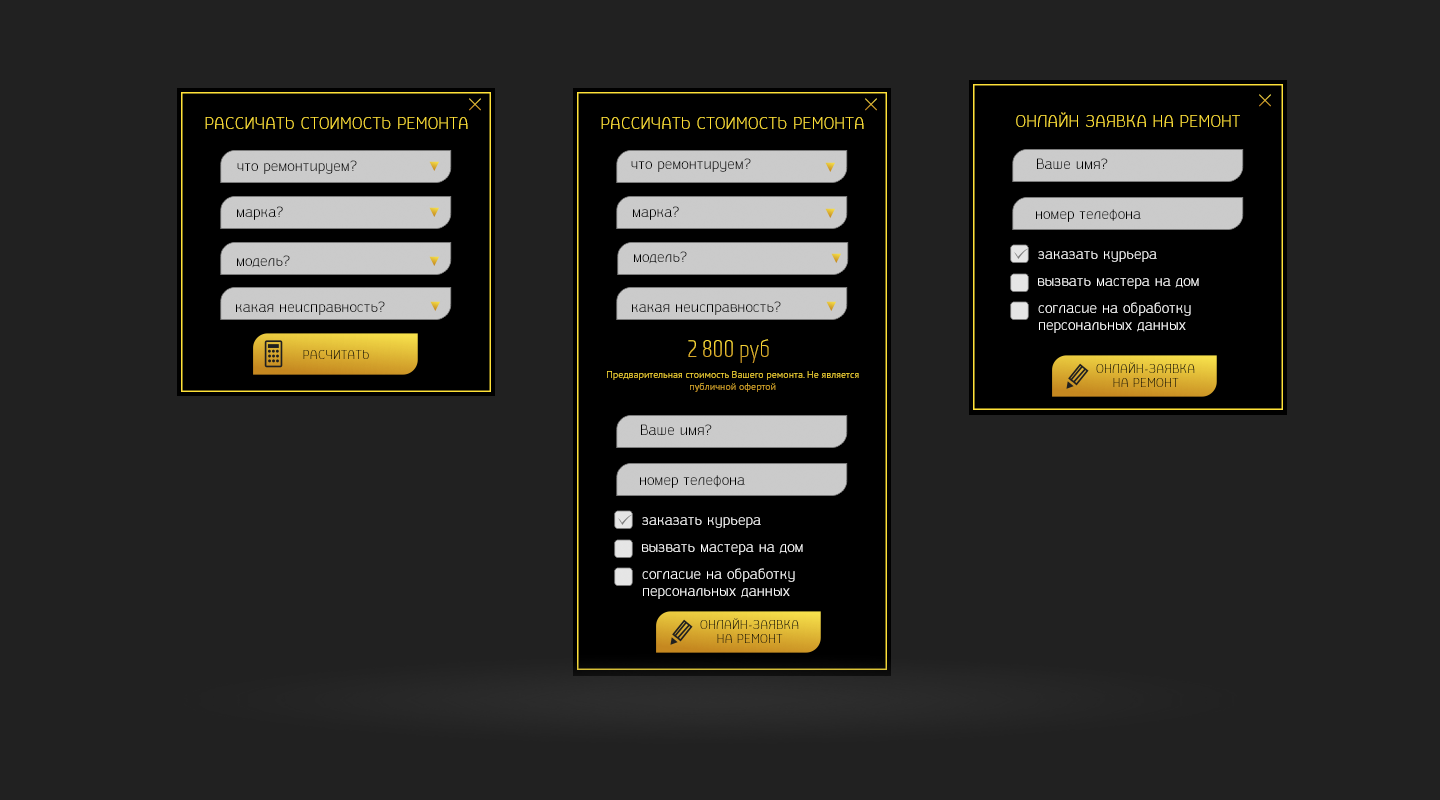
<style>
.page{position:relative;width:1440px;height:800px;background:#212121}
.page>*{position:absolute;margin:0}
.t1{font:16px "Untitled";color:#ffe138}
.t2{font:14px "Untitled";color:#000000}
.t3{font:14px "Untitled";color:#ffffff}
.t4{font:24px "Monitorca"}
.t5{font:12px "Untitled"}
.t6{font:10px "PTSans-Regular"}
</style>
<div class="page">
<p class="t1" style="left:1016px;top:112px;width:224px;height:15px">ОНЛАЙН ЗАЯВКА НА РЕМОНТ</p>
<p class="t1" style="left:205px;top:117px;width:263px;height:12px">РАССИЧАТЬ СТОИМОСТЬ РЕМОНТА</p>
<p class="t1" style="left:601px;top:117px;width:263px;height:12px">РАССИЧАТЬ СТОИМОСТЬ РЕМОНТА</p>
<p class="t2" style="left:237px;top:160px;width:120px;height:14px">что ремонтируем?</p>
<p class="t2" style="left:631px;top:158px;width:120px;height:14px">что ремонтируем?</p>
<p class="t2" style="left:1037px;top:158px;width:71px;height:11px">Ваше имя?</p>
<p class="t2" style="left:237px;top:206px;width:46px;height:14px">марка?</p>
<p class="t2" style="left:633px;top:206px;width:46px;height:14px">марка?</p>
<p class="t2" style="left:1036px;top:209px;width:105px;height:13px">номер телефона</p>
<p class="t2" style="left:237px;top:255px;width:53px;height:13px">модель?</p>
<p class="t2" style="left:634px;top:251px;width:53px;height:13px">модель?</p>
<p class="t3" style="left:1038px;top:251px;width:119px;height:11px">заказать курьера</p>
<p class="t3" style="left:1038px;top:278px;width:161px;height:11px">вызвать мастера на дом</p>
<p class="t2" style="left:236px;top:301px;width:149px;height:14px">какая неисправность?</p>
<p class="t2" style="left:632px;top:301px;width:149px;height:14px">какая неисправность?</p>
<p class="t3" style="left:1038px;top:302px;width:153px;height:31px">согласие на обработку<br>персональных данных</p>
<p class="t4" style="left:688px;top:339px;width:81px;height:24px">2 800 руб</p>
<p class="t5" style="left:303px;top:350px;width:66px;height:9px">РАСЧИТАТЬ</p>
<p class="t5" style="left:1096px;top:362px;width:99px;height:25px;text-align:center">ОНЛАЙН-ЗАЯВКА<br>НА РЕМОНТ</p>
<p class="t6" style="left:607px;top:371px;width:252px;height:21px;text-align:center">Предварительная стоимость Вашего ремонта. Не является публичной офертой</p>
<p class="t2" style="left:641px;top:424px;width:71px;height:11px">Ваше имя?</p>
<p class="t2" style="left:640px;top:475px;width:105px;height:13px">номер телефона</p>
<p class="t3" style="left:642px;top:517px;width:119px;height:11px">заказать курьера</p>
<p class="t3" style="left:642px;top:544px;width:161px;height:11px">вызвать мастера на дом</p>
<p class="t3" style="left:642px;top:568px;width:153px;height:31px">согласие на обработку<br>персональных данных</p>
<p class="t5" style="left:700px;top:618px;width:99px;height:25px;text-align:center">ОНЛАЙН-ЗАЯВКА<br>НА РЕМОНТ</p>
</div>
